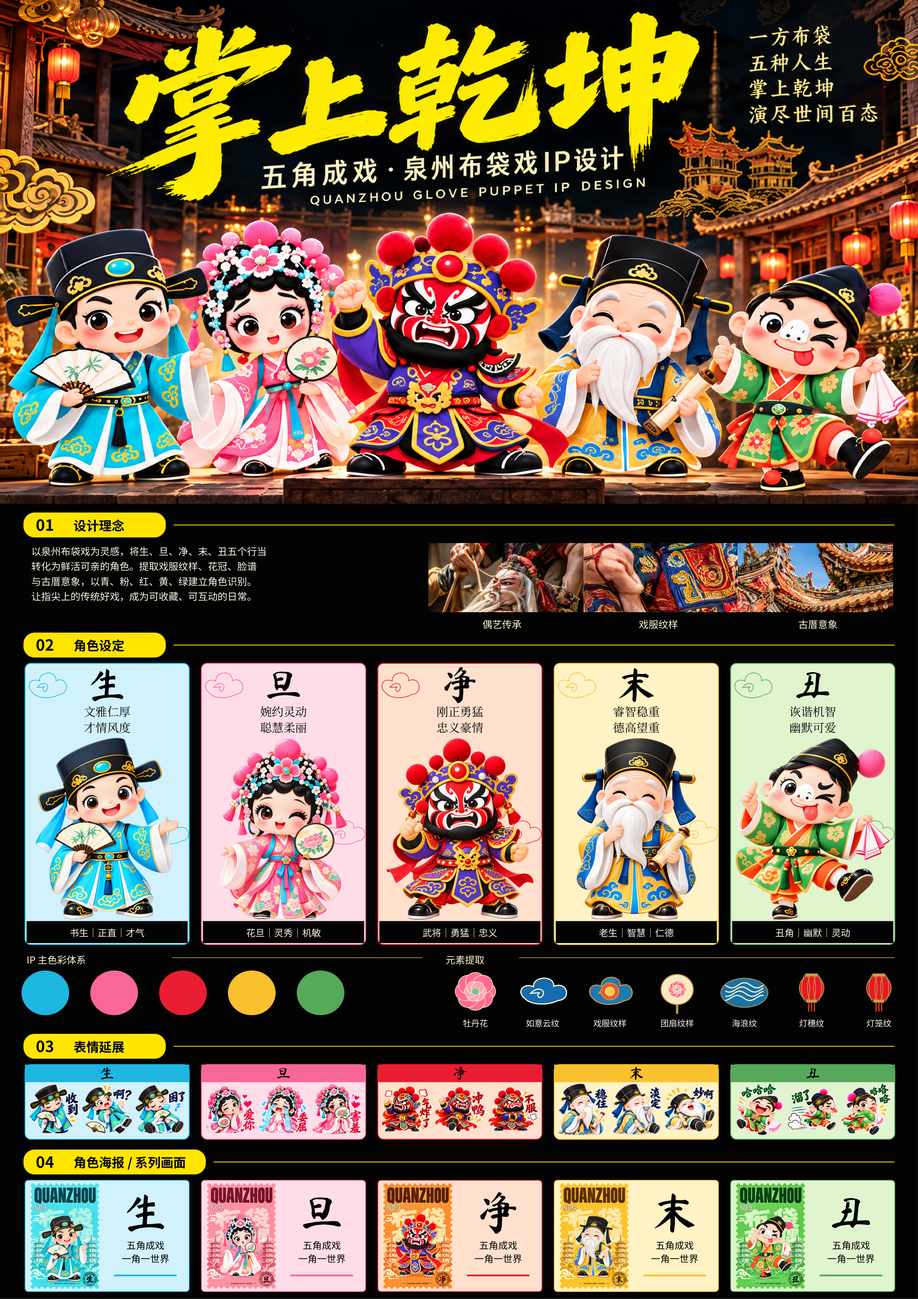
<style>
.page{position:relative;width:918px;height:1299px}
.page>*{position:absolute;margin:0}
.t1{font:15.4px "NotoSansSC-Bold";color:#030403}
.t2{font:12.7px "NotoSansSC-Bold";color:#030403}
.t3{font:9.8px "NotoSansSC-Regular";color:#f7f5e6}
.t4{font:9.8px "NotoSansSC-Regular";color:#fff5d1}
.t5{font:38.1px "MaShanZheng-Regular";color:#030403}
.t6{font:11.7px "NotoSerifSC-Regular";color:#030403}
.t7{font:9.4px "NotoSansSC-Regular";color:#f7f5e6}
.t8{font:9.7px "NotoSansSC-Regular";color:#fff5d1}
.t9{font:8.3px "NotoSansSC-Regular";color:#f7f5e6}
.t10{font:14.6px "MaShanZheng-Regular";color:#030403}
.t11{font:43.9px "MaShanZheng-Regular";color:#030403}
.t12{font:9.5px "NotoSansSC-Regular";color:#030403}
</style>
<div class="page">
<p class="t1" style="left:36px;top:519px;width:17px;height:12px">01</p>
<p class="t2" style="left:74px;top:519px;width:50px;height:13px">设计理念</p>
<p class="t3" style="left:32px;top:547px;width:234px;height:9px">以泉州布袋戏为灵感，将生、旦、净、末、丑五个行当</p>
<p class="t3" style="left:32px;top:561px;width:225px;height:10px">转化为鲜活可亲的角色。提取戏服纹样、花冠、脸谱</p>
<p class="t3" style="left:32px;top:577px;width:219px;height:9px">与古厝意象，以青、粉、红、黄、绿建立角色识别。</p>
<p class="t3" style="left:32px;top:592px;width:219px;height:9px">让指尖上的传统好戏，成为可收藏、可互动的日常。</p>
<p class="t4" style="left:483px;top:620px;width:38px;height:9px">偶艺传承</p>
<p class="t4" style="left:639px;top:620px;width:39px;height:9px">戏服纹样</p>
<p class="t4" style="left:799px;top:620px;width:38px;height:9px">古厝意象</p>
<p class="t1" style="left:36px;top:639px;width:17px;height:12px">02</p>
<p class="t2" style="left:74px;top:639px;width:50px;height:13px">角色设定</p>
<p class="t5" style="left:91px;top:669px;width:33px;height:32px">生</p>
<p class="t5" style="left:267px;top:671px;width:33px;height:27px">旦</p>
<p class="t5" style="left:444px;top:667px;width:32px;height:36px">净</p>
<p class="t5" style="left:619px;top:668px;width:35px;height:34px">末</p>
<p class="t5" style="left:796px;top:672px;width:34px;height:26px">丑</p>
<p class="t6" style="left:84px;top:706px;width:46px;height:11px">文雅仁厚</p>
<p class="t6" style="left:260px;top:706px;width:47px;height:11px">婉约灵动</p>
<p class="t6" style="left:437px;top:706px;width:46px;height:11px">刚正勇猛</p>
<p class="t6" style="left:614px;top:706px;width:46px;height:11px">睿智稳重</p>
<p class="t6" style="left:790px;top:706px;width:46px;height:11px">诙谐机智</p>
<p class="t6" style="left:84px;top:722px;width:46px;height:11px">才情风度</p>
<p class="t6" style="left:260px;top:722px;width:47px;height:11px">聪慧柔丽</p>
<p class="t6" style="left:437px;top:722px;width:46px;height:11px">忠义豪情</p>
<p class="t6" style="left:613px;top:722px;width:47px;height:11px">德高望重</p>
<p class="t6" style="left:790px;top:722px;width:46px;height:11px">幽默可爱</p>
<p class="t7" style="left:70px;top:928px;width:74px;height:9px">书生｜正直｜才气</p>
<p class="t7" style="left:247px;top:928px;width:74px;height:9px">花旦｜灵秀｜机敏</p>
<p class="t7" style="left:423px;top:928px;width:74px;height:9px">武将｜勇猛｜忠义</p>
<p class="t7" style="left:599px;top:928px;width:75px;height:9px">老生｜智慧｜仁德</p>
<p class="t7" style="left:776px;top:928px;width:74px;height:9px">丑角｜幽默｜灵动</p>
<p class="t8" style="left:27px;top:955px;width:58px;height:9px">IP 主色彩体系</p>
<p class="t8" style="left:446px;top:955px;width:38px;height:9px">元素提取</p>
<p class="t9" style="left:463px;top:1019px;width:25px;height:8px">牡丹花</p>
<p class="t9" style="left:526px;top:1019px;width:33px;height:8px">如意云纹</p>
<p class="t9" style="left:593px;top:1019px;width:33px;height:8px">戏服纹样</p>
<p class="t9" style="left:661px;top:1019px;width:33px;height:8px">团扇纹样</p>
<p class="t9" style="left:732px;top:1019px;width:25px;height:8px">海浪纹</p>
<p class="t9" style="left:799px;top:1019px;width:25px;height:8px">灯穗纹</p>
<p class="t9" style="left:867px;top:1019px;width:25px;height:8px">灯笼纹</p>
<p class="t1" style="left:36px;top:1040px;width:17px;height:12px">03</p>
<p class="t2" style="left:74px;top:1040px;width:50px;height:13px">表情延展</p>
<p class="t10" style="left:101px;top:1067px;width:12px;height:12px">生</p>
<p class="t10" style="left:277px;top:1068px;width:13px;height:10px">旦</p>
<p class="t10" style="left:454px;top:1066px;width:12px;height:14px">净</p>
<p class="t10" style="left:630px;top:1066px;width:13px;height:14px">末</p>
<p class="t10" style="left:806px;top:1068px;width:14px;height:10px">丑</p>
<p class="t1" style="left:36px;top:1156px;width:18px;height:12px">04</p>
<p class="t2" style="left:74px;top:1156px;width:112px;height:13px">角色海报 / 系列画面</p>
<p class="t11" style="left:480px;top:1192px;width:36px;height:41px">净</p>
<p class="t11" style="left:655px;top:1193px;width:40px;height:39px">末</p>
<p class="t11" style="left:127px;top:1194px;width:37px;height:37px">生</p>
<p class="t11" style="left:303px;top:1197px;width:38px;height:31px">旦</p>
<p class="t11" style="left:832px;top:1198px;width:38px;height:30px">丑</p>
<p class="t12" style="left:127px;top:1240px;width:37px;height:10px">五角成戏</p>
<p class="t12" style="left:303px;top:1240px;width:38px;height:10px">五角成戏</p>
<p class="t12" style="left:480px;top:1240px;width:37px;height:10px">五角成戏</p>
<p class="t12" style="left:656px;top:1240px;width:38px;height:10px">五角成戏</p>
<p class="t12" style="left:833px;top:1240px;width:37px;height:10px">五角成戏</p>
<p class="t12" style="left:122px;top:1254px;width:47px;height:9px">一角一世界</p>
<p class="t12" style="left:298px;top:1254px;width:48px;height:9px">一角一世界</p>
<p class="t12" style="left:475px;top:1254px;width:47px;height:9px">一角一世界</p>
<p class="t12" style="left:651px;top:1254px;width:47px;height:9px">一角一世界</p>
<p class="t12" style="left:828px;top:1254px;width:47px;height:9px">一角一世界</p>
</div>
